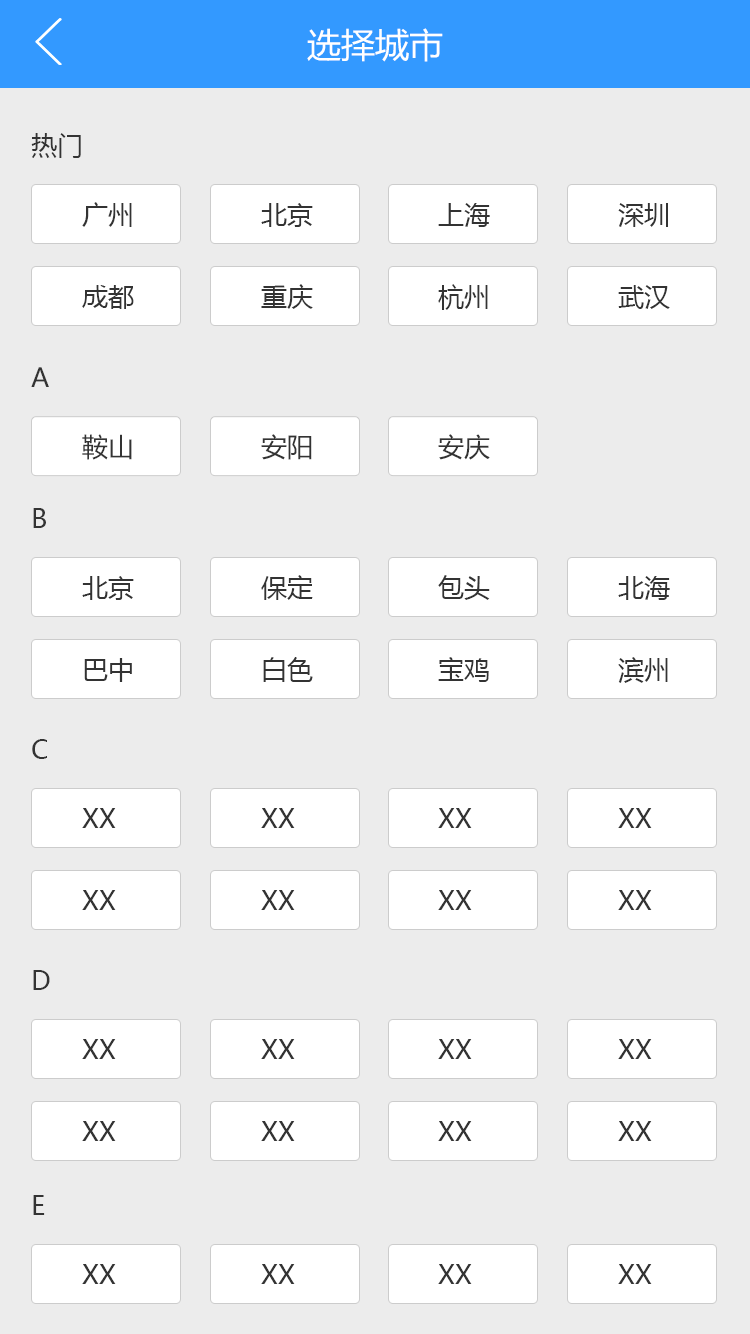
<style>
.page{position:relative;width:750px;height:1334px;background:#ececec}
.page>*{position:absolute;margin:0}
.t1{font:34px "MicrosoftYaHei";color:#ffffff}
.t2{font:26px "MicrosoftYaHei";color:#333333}
</style>
<div class="page">
<p class="t1" style="left:307px;top:28px;width:136px;height:34px">选择城市</p>
<p class="t2" style="left:31px;top:133px;width:50px;height:25px">热门</p>
<p class="t2" style="left:82px;top:202px;width:50px;height:25px">广州</p>
<p class="t2" style="left:261px;top:203px;width:52px;height:24px">北京</p>
<p class="t2" style="left:438px;top:203px;width:52px;height:24px">上海</p>
<p class="t2" style="left:618px;top:203px;width:50px;height:24px">深圳</p>
<p class="t2" style="left:82px;top:285px;width:52px;height:24px">成都</p>
<p class="t2" style="left:261px;top:284px;width:52px;height:25px">重庆</p>
<p class="t2" style="left:438px;top:284px;width:50px;height:26px">杭州</p>
<p class="t2" style="left:618px;top:285px;width:52px;height:24px">武汉</p>
<p class="t2" style="left:31px;top:367px;width:18px;height:20px">A</p>
<p class="t2" style="left:82px;top:434px;width:50px;height:26px">鞍山</p>
<p class="t2" style="left:261px;top:434px;width:51px;height:26px">安阳</p>
<p class="t2" style="left:438px;top:434px;width:52px;height:26px">安庆</p>
<p class="t2" style="left:33px;top:508px;width:13px;height:20px">B</p>
<p class="t2" style="left:82px;top:576px;width:52px;height:24px">北京</p>
<p class="t2" style="left:261px;top:575px;width:52px;height:25px">保定</p>
<p class="t2" style="left:438px;top:575px;width:52px;height:25px">包头</p>
<p class="t2" style="left:618px;top:576px;width:52px;height:24px">北海</p>
<p class="t2" style="left:84px;top:658px;width:48px;height:24px">巴中</p>
<p class="t2" style="left:263px;top:657px;width:50px;height:25px">白色</p>
<p class="t2" style="left:438px;top:657px;width:51px;height:25px">宝鸡</p>
<p class="t2" style="left:618px;top:657px;width:50px;height:26px">滨州</p>
<p class="t2" style="left:32px;top:739px;width:15px;height:20px">C</p>
<p class="t2" style="left:82px;top:808px;width:34px;height:20px">XX</p>
<p class="t2" style="left:261px;top:808px;width:34px;height:20px">XX</p>
<p class="t2" style="left:438px;top:808px;width:34px;height:20px">XX</p>
<p class="t2" style="left:618px;top:808px;width:34px;height:20px">XX</p>
<p class="t2" style="left:82px;top:890px;width:34px;height:20px">XX</p>
<p class="t2" style="left:261px;top:890px;width:34px;height:20px">XX</p>
<p class="t2" style="left:438px;top:890px;width:34px;height:20px">XX</p>
<p class="t2" style="left:618px;top:890px;width:34px;height:20px">XX</p>
<p class="t2" style="left:33px;top:970px;width:17px;height:20px">D</p>
<p class="t2" style="left:82px;top:1039px;width:34px;height:20px">XX</p>
<p class="t2" style="left:261px;top:1039px;width:34px;height:20px">XX</p>
<p class="t2" style="left:438px;top:1039px;width:34px;height:20px">XX</p>
<p class="t2" style="left:618px;top:1039px;width:34px;height:20px">XX</p>
<p class="t2" style="left:82px;top:1121px;width:34px;height:20px">XX</p>
<p class="t2" style="left:261px;top:1121px;width:34px;height:20px">XX</p>
<p class="t2" style="left:438px;top:1121px;width:34px;height:20px">XX</p>
<p class="t2" style="left:618px;top:1121px;width:34px;height:20px">XX</p>
<p class="t2" style="left:33px;top:1195px;width:12px;height:20px">E</p>
<p class="t2" style="left:82px;top:1264px;width:34px;height:20px">XX</p>
<p class="t2" style="left:261px;top:1264px;width:34px;height:20px">XX</p>
<p class="t2" style="left:438px;top:1264px;width:34px;height:20px">XX</p>
<p class="t2" style="left:618px;top:1264px;width:34px;height:20px">XX</p>
</div>
